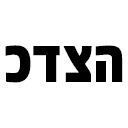
<style>
.page{position:relative;width:128px;height:128px;background:#ffffff}
.page>*{position:absolute;margin:0}
.t1{font:75.3px "FbAlbatros-Black";color:#000000;scale:0.8 1}
</style>
<div class="page">
<p class="t1" style="left:5px;top:45px;width:118px;height:38px">הצדכ</p>
</div>
